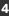
<style>
.page{position:relative;width:9px;height:16px;background:#333333}
.page>*{position:absolute;margin:0}
.t1{font:12.5px "RoundedMplus1c-ExtraBold";color:#ffffff}
</style>
<div class="page">
<p class="t1" style="left:1px;top:3px;width:8px;height:11px">4</p>
</div>
